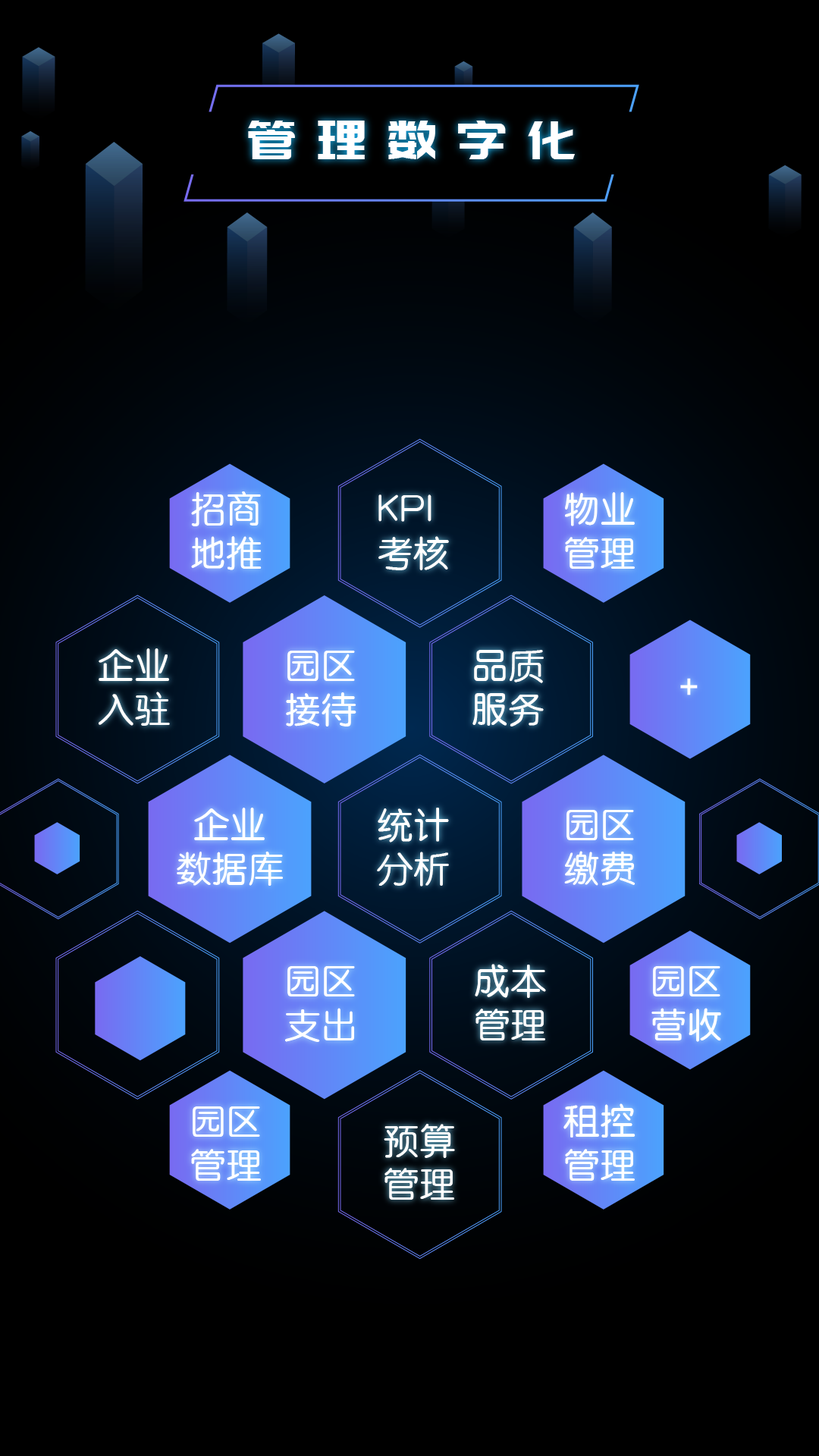
<style>
.page{position:relative;width:819px;height:1456px;background:#000000}
.page>*{position:absolute;margin:0}
.t1{font:53.1px "PangMenZhengDao";letter-spacing:0.4em;color:#ffffff}
.t2{font:36.4px "HYe3gj";color:#ffffff}
.t3{font:34.1px "AlibabaPuHuiTi-Regular";letter-spacing:0.32em;color:#ffffff}
</style>
<div class="page">
<p class="t1" style="left:248px;top:121px;width:327px;height:38px">管理数字化</p>
<p class="t2" style="left:191px;top:491px;width:71px;height:79px">招商<br>地推</p>
<p class="t2" style="left:378px;top:494px;width:71px;height:76px">KPI<br>考核</p>
<p class="t2" style="left:565px;top:492px;width:70px;height:77px">物业<br>管理</p>
<p class="t2" style="left:99px;top:648px;width:71px;height:78px">企业<br>入驻</p>
<p class="t2" style="left:286px;top:651px;width:70px;height:75px">园区<br>接待</p>
<p class="t2" style="left:472px;top:650px;width:72px;height:76px">品质<br>服务</p>
<p class="t3" style="left:680px;top:678px;width:18px;height:17px">+</p>
<p class="t2" style="left:177px;top:808px;width:106px;height:78px;text-align:center">企业<br>数据库</p>
<p class="t2" style="left:377px;top:808px;width:72px;height:78px">统计<br>分析</p>
<p class="t2" style="left:564px;top:810px;width:71px;height:76px">园区<br>缴费</p>
<p class="t2" style="left:475px;top:964px;width:71px;height:76px">成本<br>管理</p>
<p class="t2" style="left:285px;top:966px;width:70px;height:76px">园区<br>支出</p>
<p class="t2" style="left:651px;top:966px;width:70px;height:76px">园区<br>营收</p>
<p class="t2" style="left:191px;top:1106px;width:70px;height:75px">园区<br>管理</p>
<p class="t2" style="left:563px;top:1103px;width:72px;height:78px">租控<br>管理</p>
<p class="t2" style="left:384px;top:1124px;width:71px;height:76px">预算<br>管理</p>
</div>
